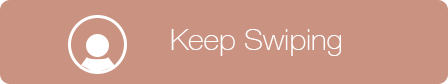
<style>
.page{position:relative;width:448px;height:84px;background:#ca9280}
.page>*{position:absolute;margin:0}
.t1{font:30px "HelveticaNeue-Thin";color:#ffffff}
</style>
<div class="page">
<p class="t1" style="left:171px;top:29px;width:170px;height:27px">Keep Swiping</p>
</div>
